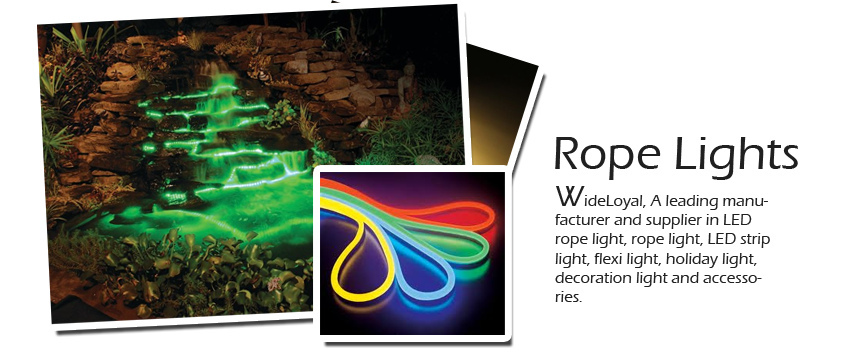
<style>
.page{position:relative;width:845px;height:351px;background:#ffffff}
.page>*{position:absolute;margin:0}
.t1{font:48px "ErasITC-Medium";color:#212020}
.t2{font:16px "ErasITC-Medium";color:#212020}
.t3{font:30px "ErasITC-Medium";color:#212020}
</style>
<div class="page">
<p class="t1" style="left:555px;top:137px;width:243px;height:43px">Rope Lights</p>
<p class="t2" style="left:555px;top:186px;width:215px;height:116px"><span class="t3">W</span>ideLoyal, A leading manufacturer and supplier in LED rope light, rope light, LED strip light, flexi light, holiday light, decoration light and accessories.</p>
</div>
